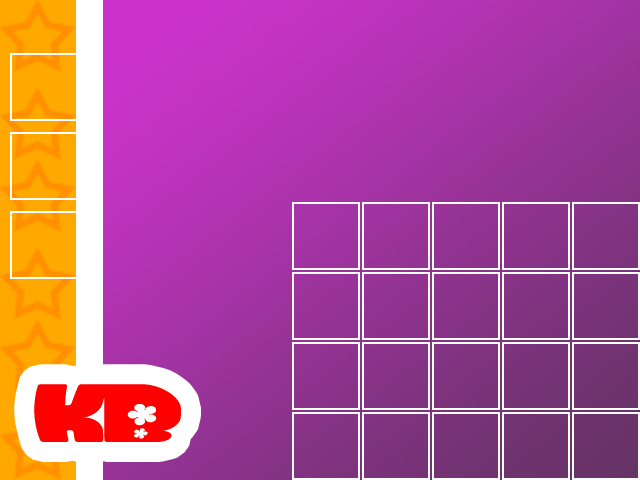
<style>
.page{position:relative;width:640px;height:480px}
.page>*{position:absolute;margin:0}
.t1{font:105px "Chick";color:#ff0000}
</style>
<div class="page">
<p class="t1" style="left:34px;top:384px;width:147px;height:58px">KB</p>
</div>
